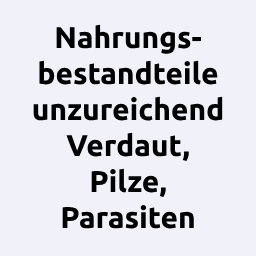
<style>
.page{position:relative;width:256px;height:256px;background:#f1f1f9}
.page>*{position:absolute;margin:0}
.t1{font:30px "Ubuntu-Bold";color:#000000}
</style>
<div class="page">
<p class="t1" style="left:33px;top:24px;width:190px;height:205px;text-align:center">Nahrungs-<br>bestandteile<br>unzureichend<br>Verdaut,<br>Pilze,<br>Parasiten</p>
</div>
